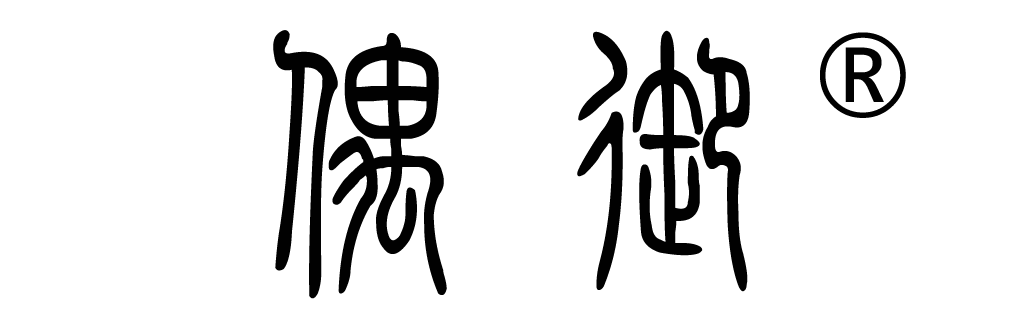
<style>
.page{position:relative;width:1024px;height:327px;background:#ffffff}
.page>*{position:absolute;margin:0}
.t1{font:300px "FZXZTFW--GB1-0";color:#010101}
.t2{font:108px "MicrosoftYaHei";color:#000000}
</style>
<div class="page">
<p class="t1" style="left:273px;top:30px;width:633px;height:269px">偶御<span class="t2">®</span></p>
</div>
